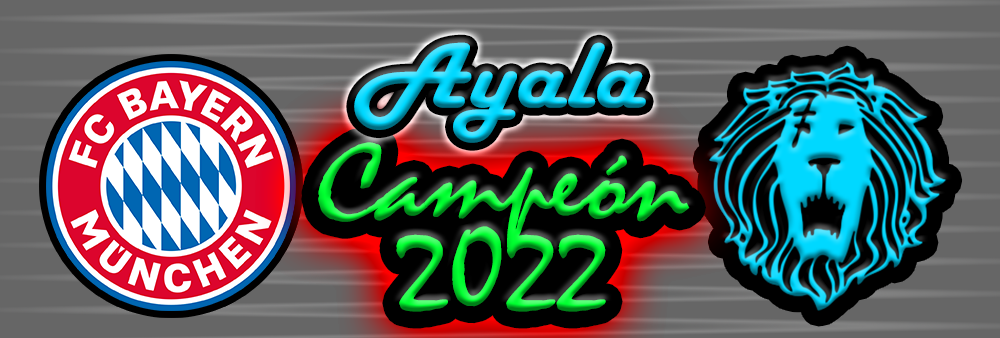
<style>
.page{position:relative;width:1000px;height:338px;background:#666666}
.page>*{position:absolute;margin:0}
.t1{font:97.3px "HarlowSolid";scale:1.11 1}
.t2{font:113.6px/85.1px "Mistral";scale:1.06 1}
</style>
<div class="page">
<p class="t1" style="left:354px;top:42px;width:292px;height:101px">Ayala</p>
<p class="t2" style="left:318px;top:142px;width:372px;height:170px;text-align:center">Campeón<br>2022</p>
</div>
